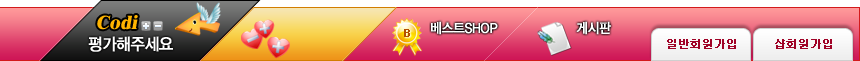
<style>
.page{position:relative;width:860px;height:61px}
.page>*{position:absolute;margin:0}
.t1{font:19.5px "Dutch801BT-ExtraBold";color:#ffb400;font-style:italic}
.t2{font:11px "Dotum";color:#b35101;font-weight:bold}
.t3{font:13.8px "YDIYGO330";letter-spacing:-0.025em;color:#ffffff;font-weight:bold;scale:0.91 1}
.t4{font:17px "YDIYGO330";letter-spacing:-0.025em;color:#ffffff;font-weight:bold;scale:0.91 1}
.t5{font:11px "Dotum";color:#a00327;font-weight:bold}
</style>
<div class="page">
<p class="t1" style="left:97px;top:15px;width:41px;height:15px">Codi</p>
<p class="t2" style="left:404px;top:29px;width:6px;height:8px">B</p>
<p class="t3" style="left:431px;top:21px;width:67px;height:14px">베스트SHOP</p>
<p class="t3" style="left:576px;top:21px;width:35px;height:14px">게시판</p>
<p class="t4" style="left:88px;top:36px;width:85px;height:16px">평가해주세요</p>
<p class="t5" style="left:667px;top:39px;width:69px;height:10px">일반회원가입</p>
<p class="t5" style="left:775px;top:39px;width:57px;height:10px">샵회원가입</p>
</div>
